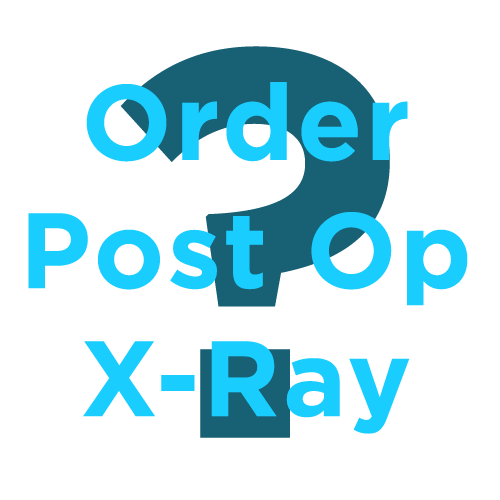
<style>
.page{position:relative;width:500px;height:500px;background:#ffffff}
.page>*{position:absolute;margin:0}
.t1{font:551.8px "Gotham-Bold";letter-spacing:0.03em;color:#186074}
.t2{font:106.7px "Gotham-Bold";letter-spacing:0.03em;color:#19ceff}
</style>
<div class="page">
<p class="t1" style="left:120px;top:46px;width:270px;height:392px">?</p>
<p class="t2" style="left:28px;top:82px;width:440px;height:352px;text-align:center">Order<br>Post Op<br>X-Ray</p>
</div>
